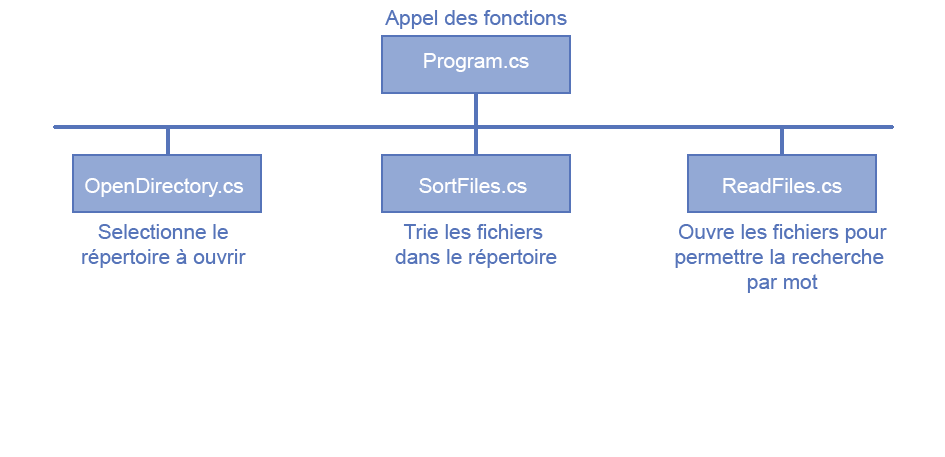
<style>
.page{position:relative;width:945px;height:457px;background:#ffffff}
.page>*{position:absolute;margin:0}
.t1{font:20.8px "ArialMT";color:#5674b9}
.t2{font:20.8px "ArialMT";color:#ffffff}
</style>
<div class="page">
<p class="t1" style="left:385px;top:10px;width:182px;height:19px">Appel des fonctions</p>
<p class="t2" style="left:424px;top:53px;width:105px;height:19px">Program.cs</p>
<p class="t2" style="left:85px;top:178px;width:159px;height:19px">OpenDirectory.cs</p>
<p class="t2" style="left:419px;top:178px;width:108px;height:15px">SortFiles.cs</p>
<p class="t2" style="left:723px;top:178px;width:119px;height:15px">ReadFiles.cs</p>
<p class="t1" style="left:82px;top:224px;width:164px;height:44px;text-align:center">Selectionne le<br>répertoire à ouvrir</p>
<p class="t1" style="left:395px;top:224px;width:162px;height:44px;text-align:center">Trie les fichiers <br>dans le répertoire</p>
<p class="t1" style="left:675px;top:224px;width:212px;height:69px;text-align:center">Ouvre les fichiers pour<br>permettre la recherche <br>par mot</p>
</div>
